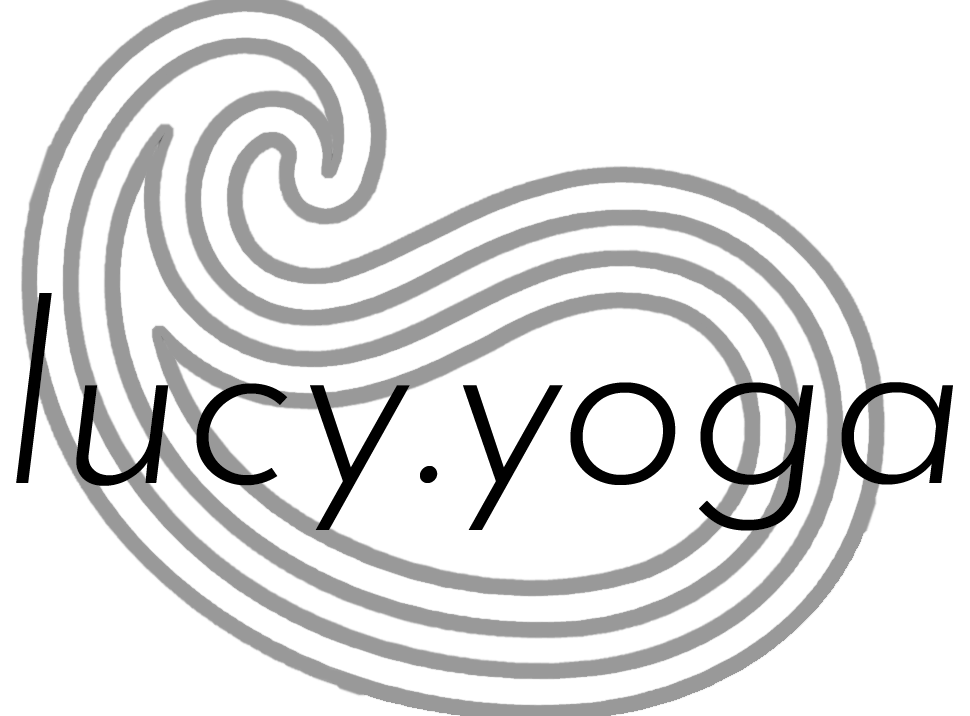
<style>
.page{position:relative;width:970px;height:716px;background:#ffffff}
.page>*{position:absolute;margin:0}
.t1{font:250px "JosefinSans-LightItalic";color:#000000}
</style>
<div class="page">
<p class="t1" style="left:16px;top:293px;width:937px;height:238px">lucy.yoga</p>
</div>
